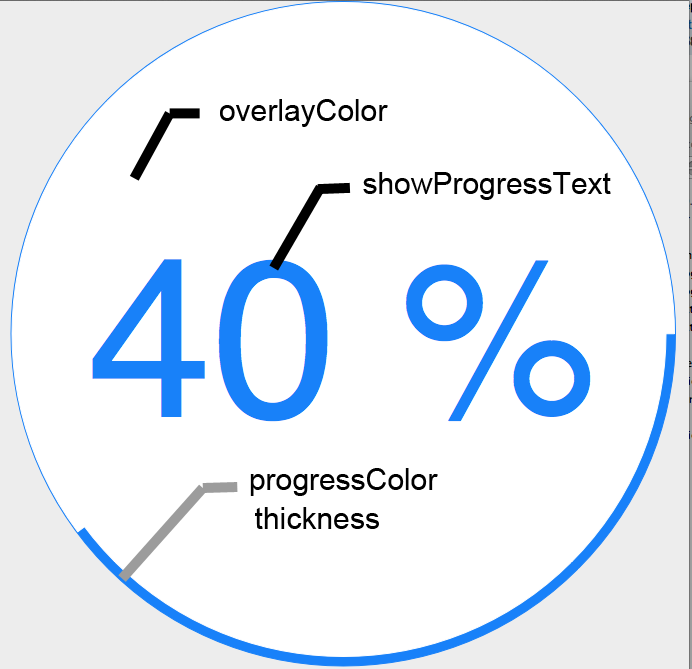
<style>
.page{position:relative;width:692px;height:669px;background:#ffffff}
.page>*{position:absolute;margin:0}
.t1{font:30px "ArialMT";color:#000000}
</style>
<div class="page">
<p class="t1" style="left:220px;top:99px;width:168px;height:28px">overlayColor</p>
<p class="t1" style="left:363px;top:172px;width:248px;height:28px">showProgressText</p>
<p class="t1" style="left:250px;top:468px;width:188px;height:28px">progressColor</p>
<p class="t1" style="left:255px;top:507px;width:124px;height:22px">thickness</p>
</div>
